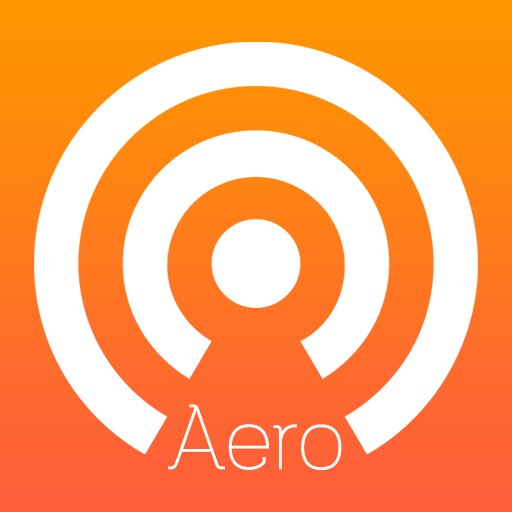
<style>
.page{position:relative;width:512px;height:512px;background:#ffffff}
.page>*{position:absolute;margin:0}
.t1{font:92.6px "EspacioNovoMedium";color:#ffffff}
</style>
<div class="page">
<p class="t1" style="left:168px;top:404px;width:174px;height:66px">Aero</p>
</div>
